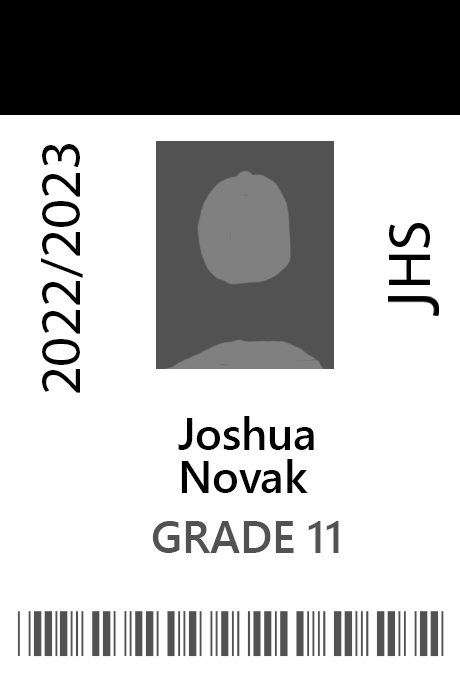
<style>
.page{position:relative;width:460px;height:690px;background:#ffffff}
.page>*{position:absolute;margin:0}
.t1{font:57.5px "MyriadPro-Regular";color:#000000}
.t2{font:44.7px "SegoeUI-Semibold";color:#000000}
.t3{font:44.7px "SegoeUI-Semibold";color:#525252}
</style>
<div class="page">
<p class="t1" style="left:41px;top:144px;width:42px;height:249px;rotate:-90deg">2022/2023</p>
<p class="t2" style="left:178px;top:416px;width:136px;height:34px">Joshua</p>
<p class="t2" style="left:181px;top:459px;width:127px;height:34px">Novak</p>
<p class="t3" style="left:152px;top:521px;width:187px;height:32px">GRADE 11</p>
</div>
